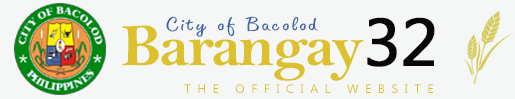
<style>
.page{position:relative;width:515px;height:99px;background:#f5f6f6}
.page>*{position:absolute;margin:0}
.t1{font:25.6px "FreestyleScript-Regular";letter-spacing:0.045em;color:#3e62a4;scale:1.27 1}
.t2{font:66.6px "MyanmarText";letter-spacing:-0.015em;color:#080808;font-weight:bold}
.t3{font:59.4px "BellMTBold";letter-spacing:-0.035em;color:#dcc12d;scale:1.08 1}
.t4{font:12.4px "MyanmarText";letter-spacing:0.505em;color:#dcc12d}
</style>
<div class="page">
<p class="t1" style="left:166px;top:16px;width:152px;height:21px">City of Bacolod</p>
<p class="t2" style="left:367px;top:17px;width:68px;height:50px">32</p>
<p class="t3" style="left:122px;top:25px;width:242px;height:56px">Barangay</p>
<p class="t4" style="left:184px;top:84px;width:250px;height:9px">THE OFFICIAL WEBSITE</p>
</div>
